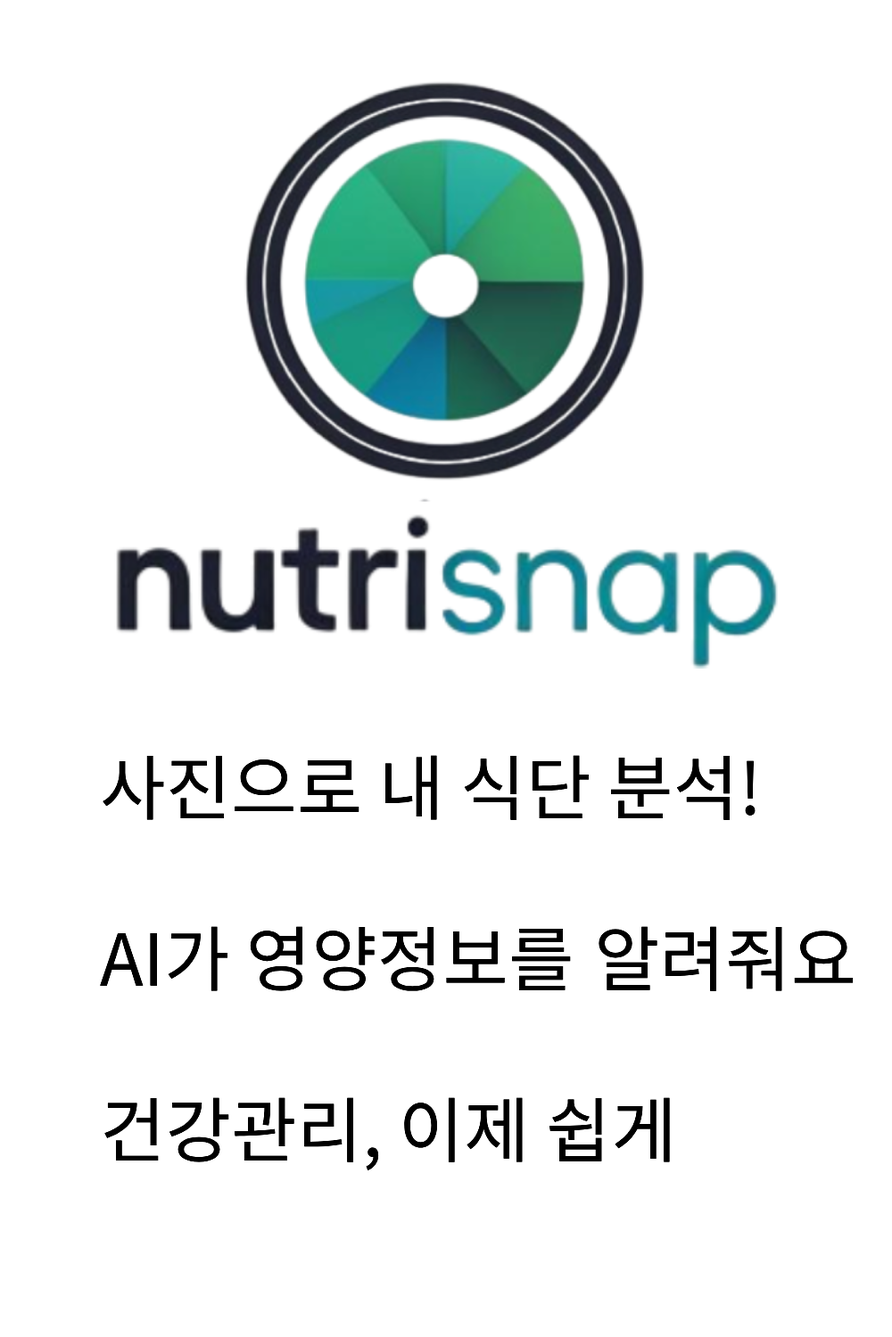
<style>
.page{position:relative;width:892px;height:1337px;background:#ffffff}
.page>*{position:absolute;margin:0}
.t1{font:71.3px "NotoSansKR-Regular";color:#000000}
</style>
<div class="page">
<p class="t1" style="left:100px;top:755px;width:753px;height:416px">사진으로 내 식단 분석!<br><br>AI가 영양정보를 알려줘요<br><br>건강관리, 이제 쉽게</p>
</div>
